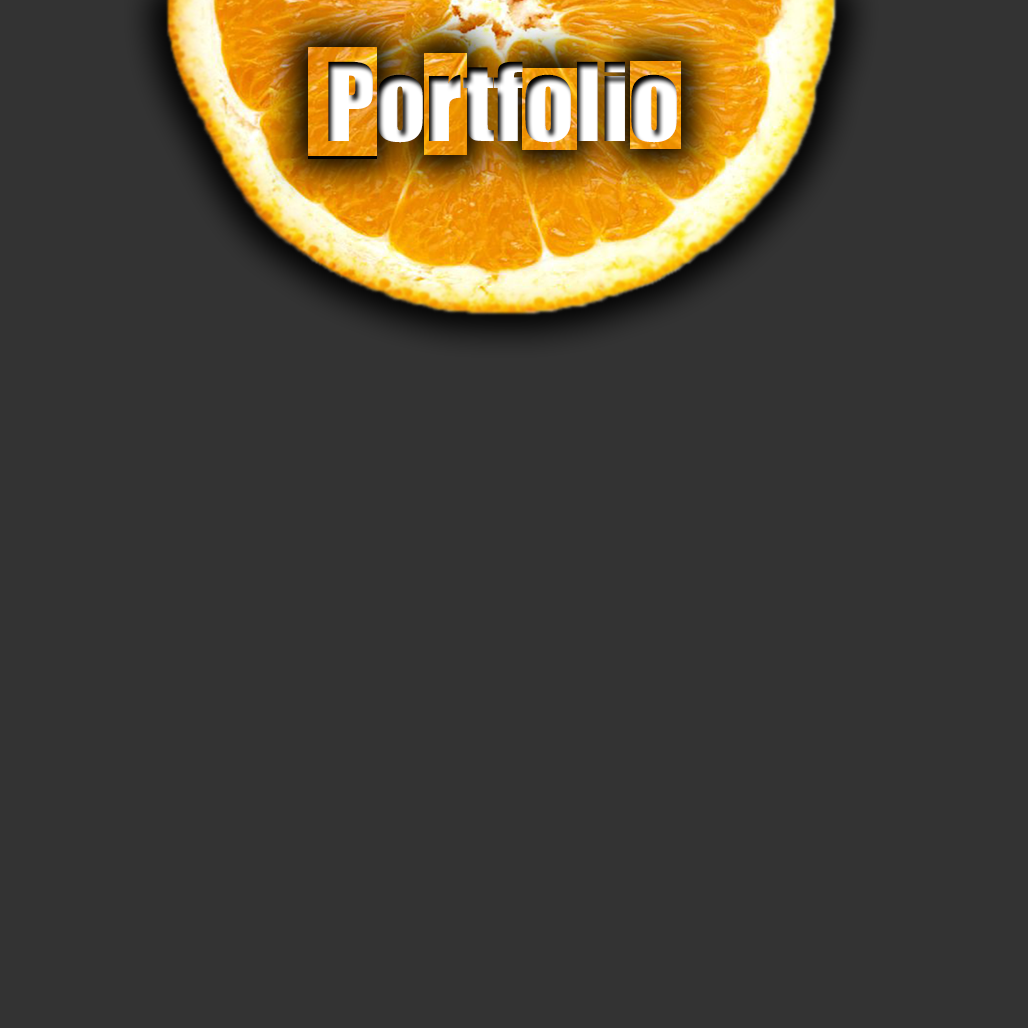
<style>
.page{position:relative;width:1028px;height:1028px;background:#333333}
.page>*{position:absolute;margin:0}
.t1{font:100px "Impact";color:#ffffff}
</style>
<div class="page">
<p class="t1" style="left:328px;top:61px;width:349px;height:82px">Portfolio</p>
</div>
